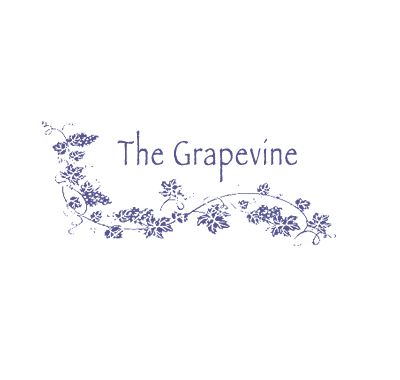
<style>
.page{position:relative;width:400px;height:380px;background:#ffffff}
.page>*{position:absolute;margin:0}
.t1{font:36px "Papyrus-Condensed";letter-spacing:0.06em;color:#575692;scale:0.96 1}
</style>
<div class="page">
<p class="t1" style="left:117px;top:130px;width:180px;height:53px">The Grapevine</p>
</div>
